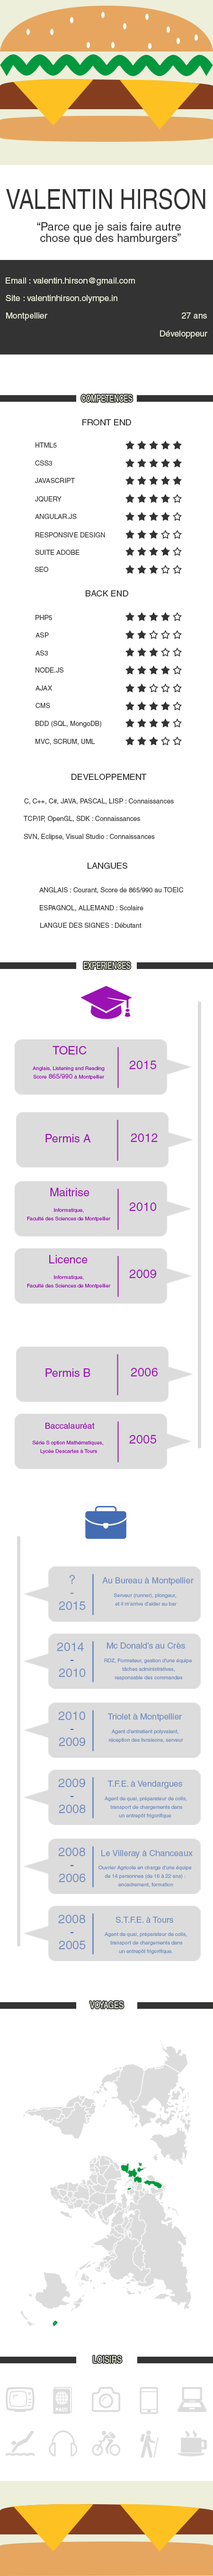
<style>
.page{position:relative;width:213px;height:2576px;background:#ffffff}
.page>*{position:absolute;margin:0}
.t1{font:27.5px "Helvetica";color:#333333;scale:0.81 1}
.t2{font:11.3px/11.3px "Helvetica";color:#333333}
.t3{font:8.5px "Helvetica";color:#edefda}
.t4{font:9.3px "Helvetica";color:#edefda;scale:0.72 1}
.t5{font:8.5px "Helvetica";color:#333333}
.t6{font:6.6px "Helvetica";color:#333333}
.t7{font:11.3px "Helvetica";color:#9a12b3}
.t8{font:12.3px "Helvetica";color:#9a12b3}
.t9{font:5.2px/8.5px "Helvetica";color:#9a12b3}
.t10{font:6.6px/8.5px "Helvetica";color:#9a12b3}
.t11{font:8.5px "Helvetica";color:#9a12b3}
.t12{font:12.3px "Helvetica";color:#7590c0}
.t13{font:8.5px "Helvetica";color:#7590c0}
.t14{font:5.2px/8.5px "Helvetica";color:#7590c0}
.t15{font:12.3px "Helvetica";color:#446cb3}
.t16{font:9.4px "Helvetica";color:#edefda;scale:0.78 1}
</style>
<div class="page">
<p class="t1" style="left:6px;top:189px;width:199px;height:20px">VALENTIN HIRSON</p>
<p class="t2" style="left:37px;top:222px;width:144px;height:22px">“Parce que je sais faire autre<br> chose que des hamburgers”</p>
<p class="t3" style="left:6px;top:277px;width:129px;height:8px">Email : valentin.hirson@gmail.com</p>
<p class="t3" style="left:6px;top:295px;width:111px;height:8px">Site : valentinhirson.olympe.in</p>
<p class="t3" style="left:6px;top:312px;width:41px;height:8px">Montpellier</p>
<p class="t3" style="left:182px;top:312px;width:25px;height:7px">27 ans</p>
<p class="t3" style="left:160px;top:330px;width:47px;height:8px">Développeur</p>
<p class="t4" style="left:81px;top:395px;width:51px;height:7px">COMPETENCES</p>
<p class="t5" style="left:82px;top:419px;width:49px;height:6px">FRONT END</p>
<p class="t6" style="left:35px;top:442px;width:22px;height:6px">HTML5</p>
<p class="t6" style="left:35px;top:460px;width:17px;height:6px">CSS3</p>
<p class="t6" style="left:35px;top:478px;width:40px;height:5px">JAVASCRIPT</p>
<p class="t6" style="left:35px;top:496px;width:26px;height:6px">JQUERY</p>
<p class="t6" style="left:35px;top:514px;width:42px;height:5px">ANGULAR.JS</p>
<p class="t6" style="left:35px;top:532px;width:70px;height:5px">RESPONSIVE DESIGN</p>
<p class="t6" style="left:35px;top:550px;width:44px;height:5px">SUITE ADOBE</p>
<p class="t6" style="left:35px;top:567px;width:13px;height:5px">SEO</p>
<p class="t5" style="left:86px;top:590px;width:42px;height:6px">BACK END</p>
<p class="t6" style="left:35px;top:615px;width:17px;height:5px">PHP5</p>
<p class="t6" style="left:35px;top:632px;width:14px;height:6px">ASP</p>
<p class="t6" style="left:35px;top:650px;width:13px;height:6px">AS3</p>
<p class="t6" style="left:35px;top:667px;width:28px;height:6px">NODE.JS</p>
<p class="t6" style="left:35px;top:685px;width:17px;height:6px">AJAX</p>
<p class="t6" style="left:35px;top:703px;width:15px;height:5px">CMS</p>
<p class="t6" style="left:35px;top:721px;width:66px;height:6px">BDD (SQL, MongoDB)</p>
<p class="t6" style="left:35px;top:739px;width:60px;height:6px">MVC, SCRUM, UML</p>
<p class="t5" style="left:71px;top:774px;width:76px;height:6px">DEVELOPPEMENT</p>
<p class="t6" style="left:24px;top:798px;width:149px;height:6px">C, C++, C#, JAVA, PASCAL, LISP : Connaissances</p>
<p class="t6" style="left:24px;top:816px;width:116px;height:6px">TCP/IP, OpenGL, SDK : Connaissances</p>
<p class="t6" style="left:24px;top:834px;width:131px;height:6px">SVN, Eclipse, Visual Studio : Connaissances</p>
<p class="t5" style="left:87px;top:862px;width:40px;height:7px">LANGUES</p>
<p class="t6" style="left:39px;top:887px;width:144px;height:6px">ANGLAIS : Courant, Score de 865/990 au TOEIC</p>
<p class="t6" style="left:40px;top:905px;width:103px;height:6px">ESPAGNOL, ALLEMAND : Scolaire</p>
<p class="t6" style="left:40px;top:923px;width:101px;height:5px">LANGUE DES SIGNES : Débutant</p>
<p class="t4" style="left:84px;top:962px;width:46px;height:7px">EXPERIENCES</p>
<p class="t7" style="left:52px;top:1046px;width:34px;height:9px">TOEIC</p>
<p class="t8" style="left:129px;top:1061px;width:27px;height:8px">2015</p>
<p class="t9" style="left:33px;top:1066px;width:71px;height:14px;text-align:center">Anglais, Listening and Reading<br>Score<span class="t10"> 865/990 </span>à Montpellier</p>
<p class="t7" style="left:45px;top:1134px;width:46px;height:8px">Permis A</p>
<p class="t8" style="left:130px;top:1133px;width:27px;height:9px">2012</p>
<p class="t7" style="left:50px;top:1188px;width:39px;height:8px">Maitrise</p>
<p class="t8" style="left:129px;top:1202px;width:27px;height:9px">2010</p>
<p class="t9" style="left:27px;top:1208px;width:84px;height:13px;text-align:center">Informatique,<br>Faculté des Sciences de Montpellier</p>
<p class="t7" style="left:49px;top:1255px;width:38px;height:8px">Licence</p>
<p class="t9" style="left:27px;top:1275px;width:84px;height:13px;text-align:center">Informatique,<br>Faculté des Sciences de Montpellier</p>
<p class="t8" style="left:129px;top:1270px;width:27px;height:8px">2009</p>
<p class="t7" style="left:45px;top:1368px;width:45px;height:9px">Permis B</p>
<p class="t8" style="left:130px;top:1368px;width:27px;height:8px">2006</p>
<p class="t11" style="left:45px;top:1423px;width:50px;height:6px">Baccalauréat</p>
<p class="t9" style="left:32px;top:1441px;width:71px;height:13px;text-align:center">Série S option Mathématiques, <br>Lycée Descartes à Tours</p>
<p class="t8" style="left:129px;top:1435px;width:27px;height:9px">2005</p>
<p class="t12" style="left:69px;top:1575px;width:6px;height:9px">?</p>
<p class="t13" style="left:102px;top:1577px;width:91px;height:8px">Au Bureau à Montpellier</p>
<p class="t12" style="left:59px;top:1601px;width:27px;height:9px">2015</p>
<p class="t12" style="left:70px;top:1592px;width:4px;height:2px">-</p>
<p class="t14" style="left:113px;top:1593px;width:63px;height:13px;text-align:center">Serveur (runner), plongeur, <br>et il m’arrive d’aider au bar</p>
<p class="t12" style="left:57px;top:1642px;width:27px;height:9px">2014</p>
<p class="t13" style="left:107px;top:1642px;width:78px;height:7px">Mc Donald’s au Crès</p>
<p class="t15" style="left:70px;top:1660px;width:4px;height:1px">-</p>
<p class="t14" style="left:104px;top:1659px;width:88px;height:21px;text-align:center">RDZ, Formateur, gestion d'une équipe <br> tâches administratives, <br>responsable des commandes</p>
<p class="t12" style="left:59px;top:1668px;width:27px;height:9px">2010</p>
<p class="t12" style="left:58px;top:1712px;width:27px;height:8px">2010</p>
<p class="t13" style="left:107px;top:1713px;width:75px;height:8px">Triolet à Montpellier</p>
<p class="t15" style="left:70px;top:1729px;width:4px;height:1px">-</p>
<p class="t14" style="left:109px;top:1729px;width:74px;height:14px;text-align:center">Agent d’entretient polyvalent, <br>réception des livraisons, serveur</p>
<p class="t12" style="left:59px;top:1738px;width:26px;height:8px">2009</p>
<p class="t12" style="left:58px;top:1779px;width:27px;height:8px">2009</p>
<p class="t13" style="left:107px;top:1781px;width:75px;height:8px">T.F.E. à Vendargues</p>
<p class="t12" style="left:59px;top:1805px;width:27px;height:8px">2008</p>
<p class="t15" style="left:70px;top:1796px;width:4px;height:1px">-</p>
<p class="t14" style="left:104px;top:1797px;width:83px;height:21px;text-align:center">Agent de quai, préparateur de colis,<br> transport de chargements dans<br>un entrepôt frigorifique</p>
<p class="t12" style="left:58px;top:1848px;width:27px;height:8px">2008</p>
<p class="t13" style="left:101px;top:1850px;width:91px;height:8px">Le Villeray à Chanceaux</p>
<p class="t15" style="left:70px;top:1865px;width:4px;height:1px">-</p>
<p class="t14" style="left:98px;top:1866px;width:93px;height:21px;text-align:center">Ouvrier Agricole en charge d'une équipe <br>de 14 personnes (de 16 à 22 ans) : <br>encadrement, formation</p>
<p class="t12" style="left:59px;top:1874px;width:27px;height:8px">2006</p>
<p class="t12" style="left:58px;top:1915px;width:27px;height:8px">2008</p>
<p class="t13" style="left:116px;top:1917px;width:57px;height:6px">S.T.F.E. à Tours</p>
<p class="t15" style="left:70px;top:1932px;width:4px;height:1px">-</p>
<p class="t14" style="left:104px;top:1932px;width:83px;height:22px;text-align:center">Agent de quai, préparateur de colis,<br> transport de chargements dans<br>un entrepôt frigorifique.</p>
<p class="t12" style="left:59px;top:1941px;width:27px;height:8px">2005</p>
<p class="t16" style="left:90px;top:2001px;width:33px;height:7px">VOYAGES</p>
<p class="t16" style="left:93px;top:2356px;width:28px;height:7px">LOISIRS</p>
</div>
